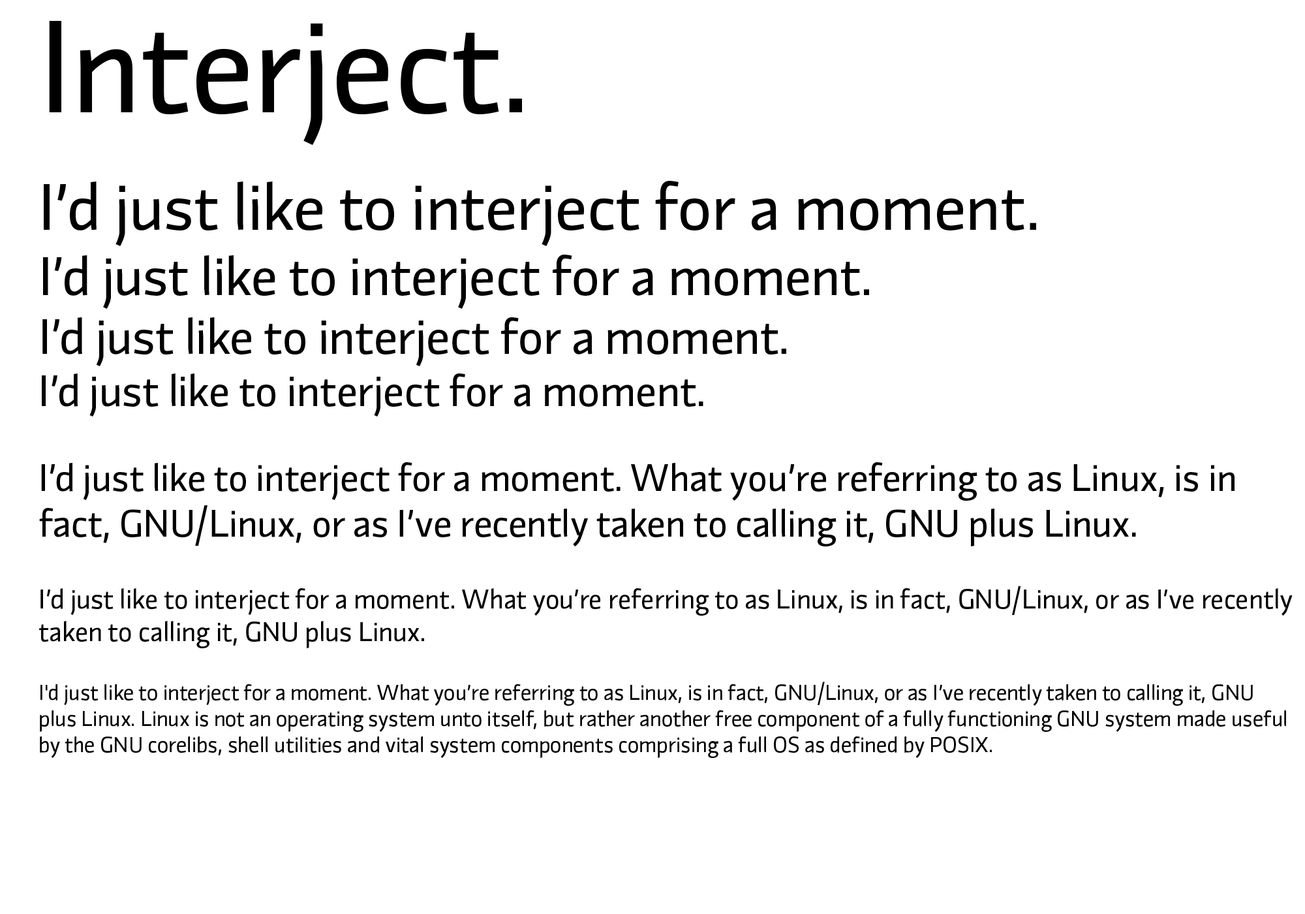
<style>
.page{position:relative;width:1305px;height:914px;background:#ffffff}
.page>*{position:absolute;margin:0}
.t1{font:21.8px "Divenire-Regular";color:#000000}
.t2{font:130.5px "Divenire-Regular";color:#000000}
.t3{font:65.3px "Divenire-Regular";color:#000000}
.t4{font:54.4px "Divenire-Regular";color:#000000}
.t5{font:48.9px "Divenire-Regular";color:#000000}
.t6{font:43.5px "Divenire-Regular";color:#000000}
.t7{font:38.1px "Divenire-Regular";color:#000000}
.t8{font:27.2px "Divenire-Regular";color:#000000}
</style>
<div class="page">
<p class="t1" style="left:39px;top:21px;width:1254px;height:737px"><span class="t2">Interject.<br><br></span><span class="t3">I’d just like to interject for a moment.<br></span><span class="t4">I’d just like to interject for a moment.<br></span><span class="t5">I’d just like to interject for a moment.<br></span><span class="t6">I’d just like to interject for a moment.<br><br></span><span class="t7">I’d just like to interject for a moment. What you’re referring to as Linux, is in fact, GNU/Linux, or as I’ve recently taken to calling it, GNU plus Linux.<br><br></span><span class="t8">I’d just like to interject for a moment. What you’re referring to as Linux, is in fact, GNU/Linux, or as I’ve recently taken to calling it, GNU plus Linux.<br><br></span>I'd just like to interject for a moment. What you’re referring to as Linux, is in fact, GNU/Linux, or as I’ve recently taken to calling it, GNU plus Linux. Linux is not an operating system unto itself, but rather another free component of a fully functioning GNU system made useful by the GNU corelibs, shell utilities and vital system components comprising a full OS as defined by POSIX.</p>
</div>
